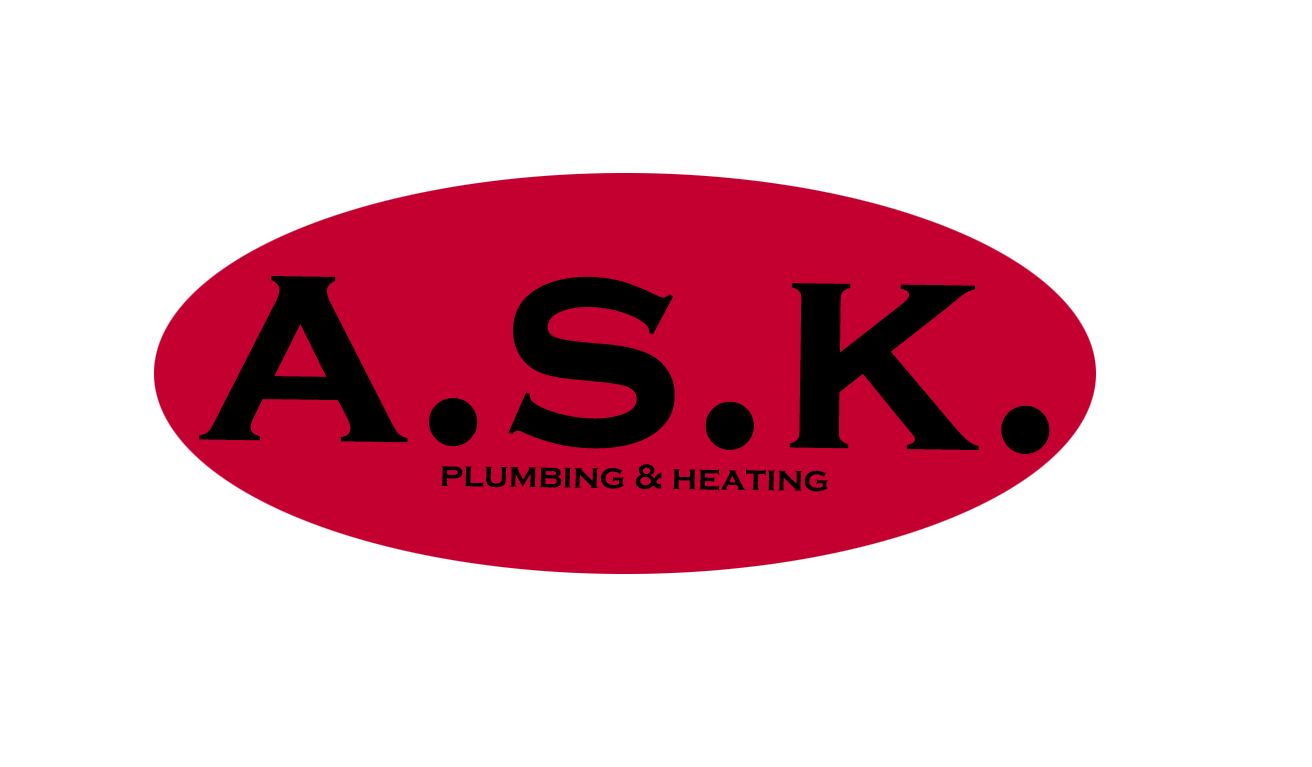
<style>
.page{position:relative;width:1312px;height:767px;background:#ffffff}
.page>*{position:absolute;margin:0}
.t1{font:36px "CopperplateGothic-Bold";color:#000000}
.t2{font:300.2px "CopperplateGothic-Bold";color:#000000}
</style>
<div class="page">
<p class="t1" style="left:199px;top:276px;width:851px;height:216px;text-align:center;rotate:1deg"><span class="t2">a.s.k.<br></span>plumbing &amp; heating</p>
</div>
